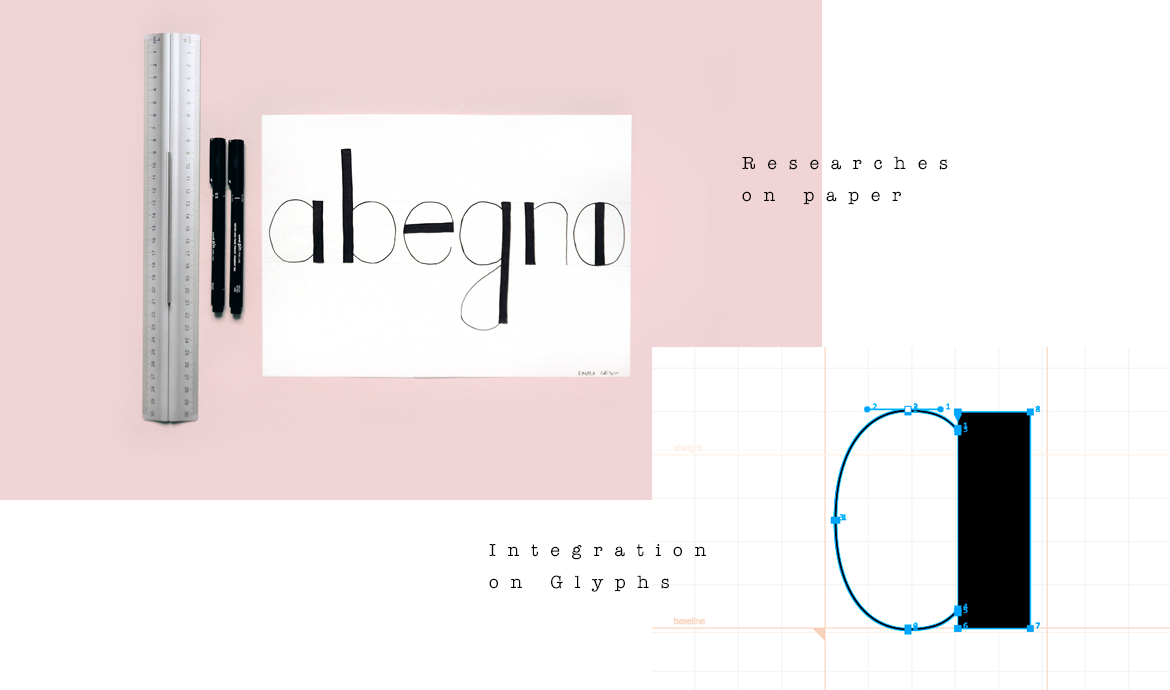
<style>
.page{position:relative;width:1170px;height:690px;background:#ffffff}
.page>*{position:absolute;margin:0}
.t1{font:18px/32.5px "AmericanTypewriter";letter-spacing:0.66em;color:#000000}
</style>
<div class="page">
<p class="t1" style="left:742px;top:156px;width:206px;height:49px">Researches<br>on paper</p>
<p class="t1" style="left:489px;top:544px;width:217px;height:48px">Integration <br>on Glyphs</p>
</div>
